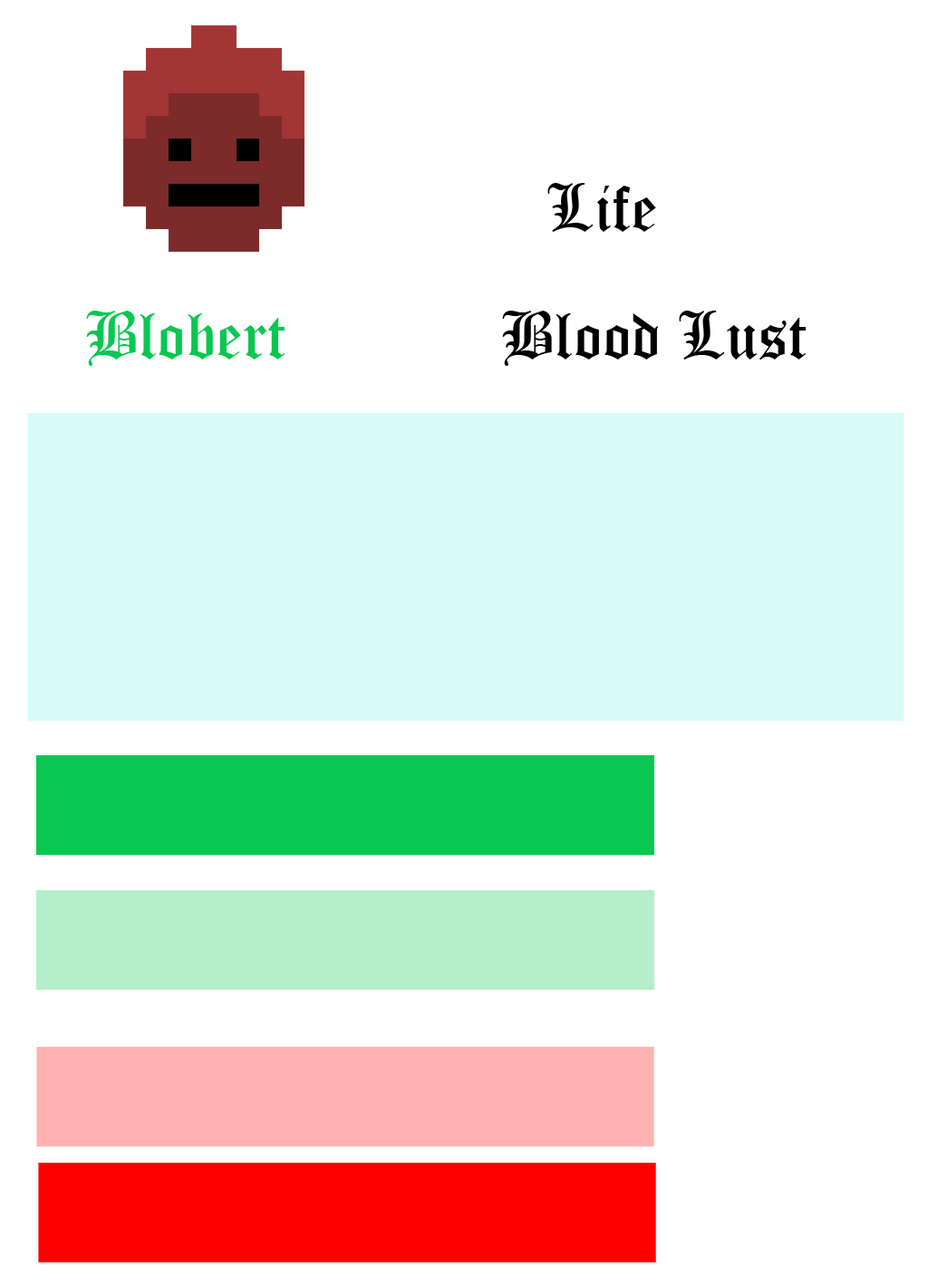
<style>
.page{position:relative;width:928px;height:1285px;background:#ffffff}
.page>*{position:absolute;margin:0}
.t1{font:65.2px "OldEnglishTextMT";color:#000000}
.t2{font:65.2px "OldEnglishTextMT";color:#09c751}
</style>
<div class="page">
<p class="t1" style="left:547px;top:183px;width:109px;height:49px">Life</p>
<p class="t2" style="left:86px;top:311px;width:198px;height:55px">Blobert</p>
<p class="t1" style="left:502px;top:311px;width:303px;height:55px">Blood Lust</p>
</div>
